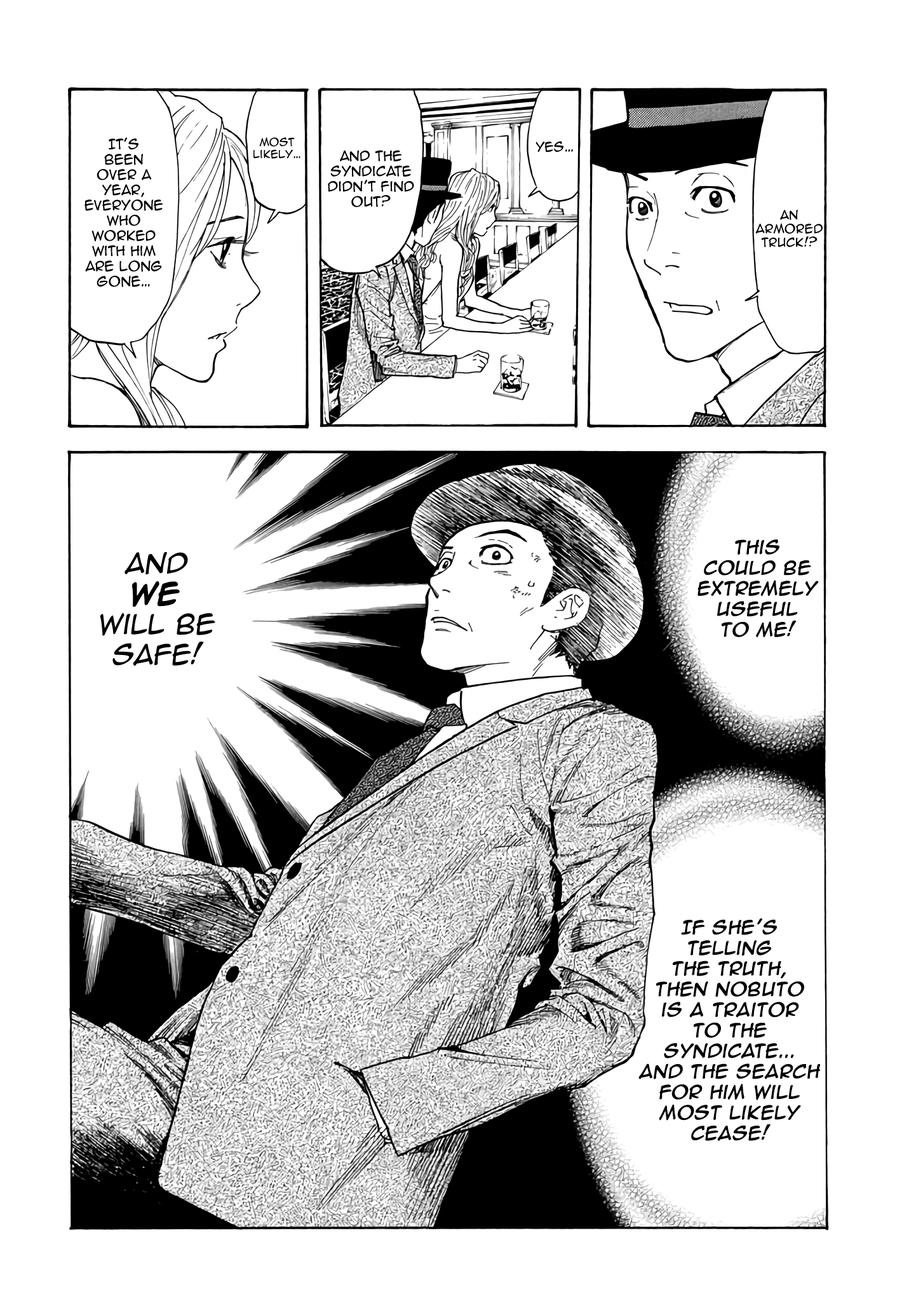
<style>
.page{position:relative;width:916px;height:1301px;background:#ffffff}
.page>*{position:absolute;margin:0}
.t1{font:12.7px "AnimeAce2.0BB";color:#000000}
.t2{font:10.2px "AnimeAce2.0BB";color:#000000}
.t3{font:12.1px "AnimeAce2.0BB";color:#000000}
.t4{font:11.4px "AnimeAce2.0BB";color:#000000}
.t5{font:17.2px "AnimeAce2.0BB";color:#000000;font-weight:bold;font-style:italic}
.t6{font:25.4px "AnimeAce2.0BB";color:#000000;font-style:italic}
.t7{font:25.4px "AnimeAce2.0BB-Bold";color:#000000;font-weight:bold}
</style>
<div class="page">
<p class="t1" style="left:85px;top:137px;width:78px;height:150px;text-align:center">It's <br>been <br>over a year, Everyone who worked with him are long gone…</p>
<p class="t2" style="left:254px;top:137px;width:47px;height:22px;text-align:center">most likely…</p>
<p class="t1" style="left:328px;top:150px;width:86px;height:57px;text-align:center">And the syndicate didn’t find out?</p>
<p class="t3" style="left:536px;top:141px;width:37px;height:12px">Yes…</p>
<p class="t4" style="left:756px;top:210px;width:67px;height:37px;text-align:center">an <br>armored truck!?</p>
<p class="t5" style="left:698px;top:539px;width:121px;height:98px;text-align:center">This <br>could be extremely useful <br>to me!</p>
<p class="t6" style="left:100px;top:552px;width:115px;height:114px;text-align:center">and <br><span class="t7">we <br></span>will be safe!</p>
<p class="t5" style="left:639px;top:918px;width:181px;height:223px;text-align:center">If she’s<br>telling <br>the truth,<br>then Nobuto <br>is a traitor<br>to the syndicate... <br>and the search <br>for him will most likely cease!</p>
</div>
